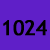
<style>
.page{position:relative;width:50px;height:50px;background:#5f1fc8}
.page>*{position:absolute;margin:0}
.t1{font:20.8px "TrebuchetMS";color:#000000;font-weight:bold}
</style>
<div class="page">
<p class="t1" style="left:3px;top:20px;width:44px;height:16px">1024</p>
</div>
